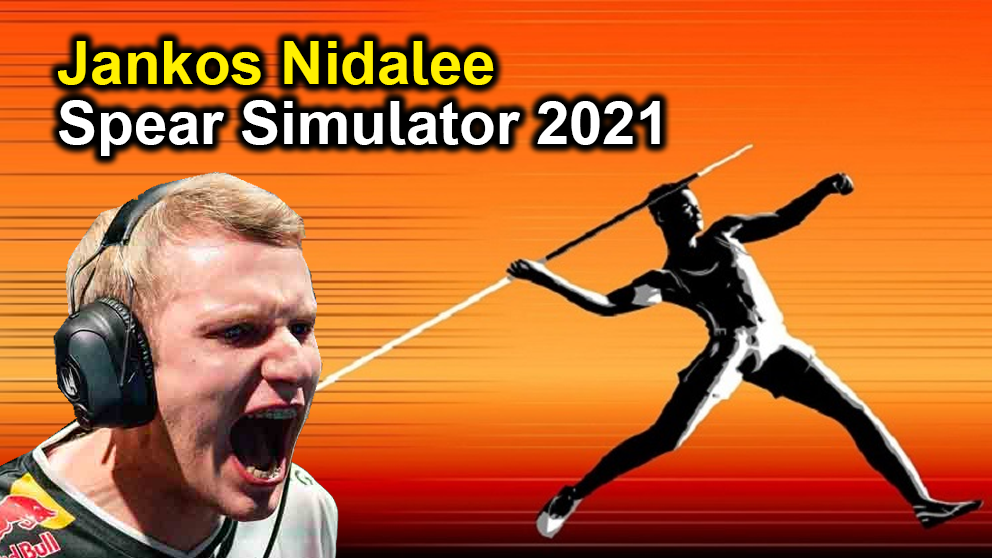
<style>
.page{position:relative;width:992px;height:558px}
.page>*{position:absolute;margin:0}
.t1{font:60px/60px "Arial-BoldMT";color:#ffffff}
.t2{font:60px/60px "Arial-BoldMT";color:#fff000}
</style>
<div class="page">
<p class="t1" style="left:58px;top:41px;width:602px;height:115px"><span class="t2">Jankos Nidalee<br></span>Spear Simulator 2021</p>
</div>
